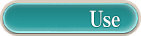
<style>
.page{position:relative;width:141px;height:36px}
.page>*{position:absolute;margin:0}
.t1{font:22px "RyuminPro-ExBold";letter-spacing:-0.04em;color:#ffffff;scale:0.9 1}
</style>
<div class="page">
<p class="t1" style="left:89px;top:10px;width:31px;height:17px">Use</p>
</div>
